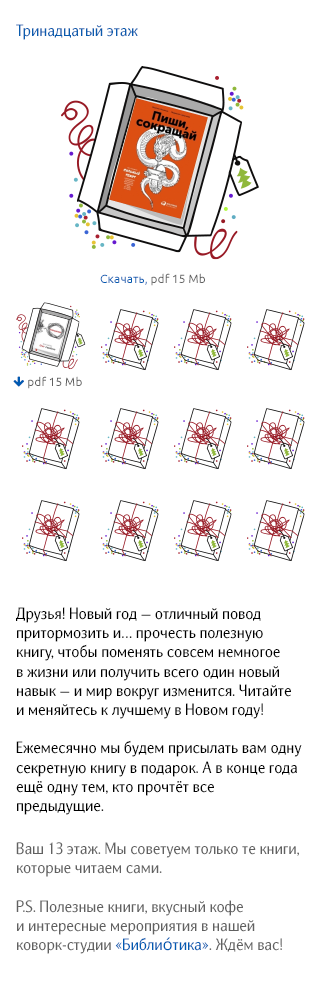
<style>
.page{position:relative;width:320px;height:1005px;background:#ffffff}
.page>*{position:absolute;margin:0}
.t1{font:16px "NatGrotesk-Regular";color:#0b5cae}
.t2{font:12px "Ubuntu-Regular";color:#616161}
.t3{font:12px "Ubuntu-Regular";color:#005ab1}
.t4{font:16px "NatGrotesk-Regular";color:#000000}
.t5{font:16px "NatGrotesk-Regular";color:#616161}
.t6{font:16px "NatGrotesk-Regular";color:#005ab1}
.t7{font:16px "LucidaGrande";color:#005ab1}
</style>
<div class="page">
<p class="t1" style="left:16px;top:24px;width:122px;height:16px">Тринадцатый этаж</p>
<p class="t2" style="left:100px;top:273px;width:105px;height:13px"><span class="t3">Скачать, </span>pdf 15 Mb</p>
<p class="t4" style="left:16px;top:607px;width:286px;height:347px">Друзья! Новый год — отличный повод притормозить и… прочесть полезную книгу, чтобы поменять совсем немногое <br>в жизни или получить всего один новый навык — и мир вокруг изменится. Читайте <br>и меняйтесь к лучшему в Новом году!<br><br>Ежемесячно мы будем присылать вам одну секретную книгу в подарок. А в конце года ещё одну тем, кто прочтёт все предыдущие.<br><br><span class="t5">Ваш 13 этаж. Мы советуем только те книги, которые читаем сами. <br><br>P.S. Полезные книги, вкусный кофе <br>и интересные мероприятия в нашей коворк-студии </span><span class="t6">«Библи</span><span class="t7">ó</span><span class="t6">тика»</span><span class="t5">. Ждём вас!</span></p>
</div>
